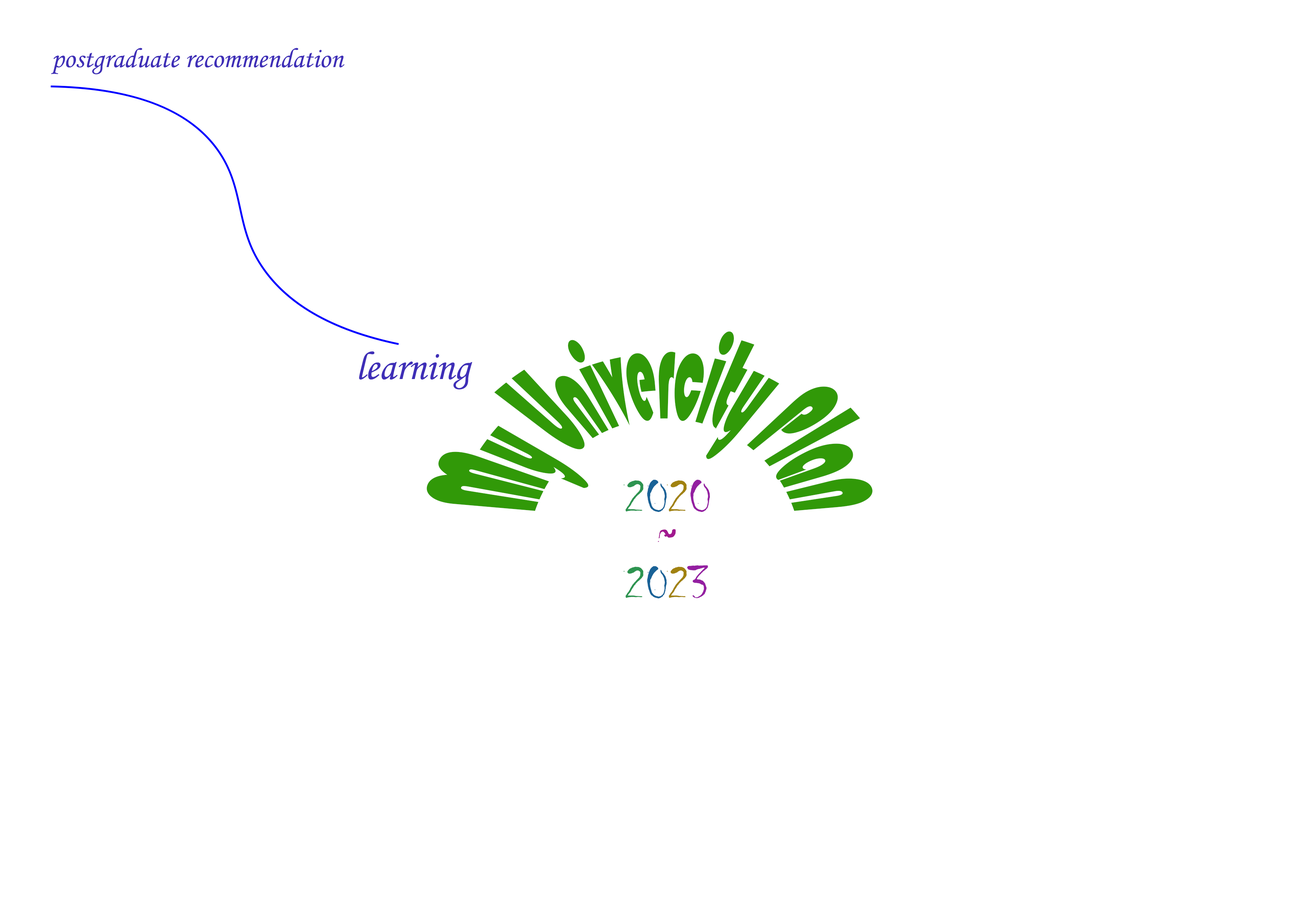
<style>
.page{position:relative;width:1299px;height:918px;background:#ffffff}
.page>*{position:absolute;margin:0}
.t1{font:27.8px "MonotypeCorsiva";color:#3e2eb7}
.t2{font:37px "Bauhaus93";color:#319908}
.t3{font:40.1px "MonotypeCorsiva";color:#3e2eb7}
.t4{font:49.4px "Chiller-Regular";color:#2d9450}
.t5{font:49.4px "Chiller-Regular";color:#196297}
.t6{font:49.4px "Chiller-Regular";color:#a18210}
.t7{font:49.4px "Chiller-Regular";color:#941fa1}
.t8{font:49.4px "Chiller-Regular";color:#a1198f}
</style>
<div class="page">
<p class="t1" style="left:51px;top:48px;width:294px;height:26px">postgraduate recommendation</p>
<p class="t2" style="left:426px;top:331px;width:446px;height:180px">My Univercity Plan</p>
<p class="t3" style="left:359px;top:351px;width:113px;height:38px">learning</p>
<p class="t4" style="left:623px;top:479px;width:87px;height:120px">2<span class="t5">0</span><span class="t6">2</span><span class="t7">0<br></span>2<span class="t5">0</span><span class="t6">2</span><span class="t7">3</span></p>
<p class="t8" style="left:658px;top:529px;width:18px;height:13px">~</p>
</div>
